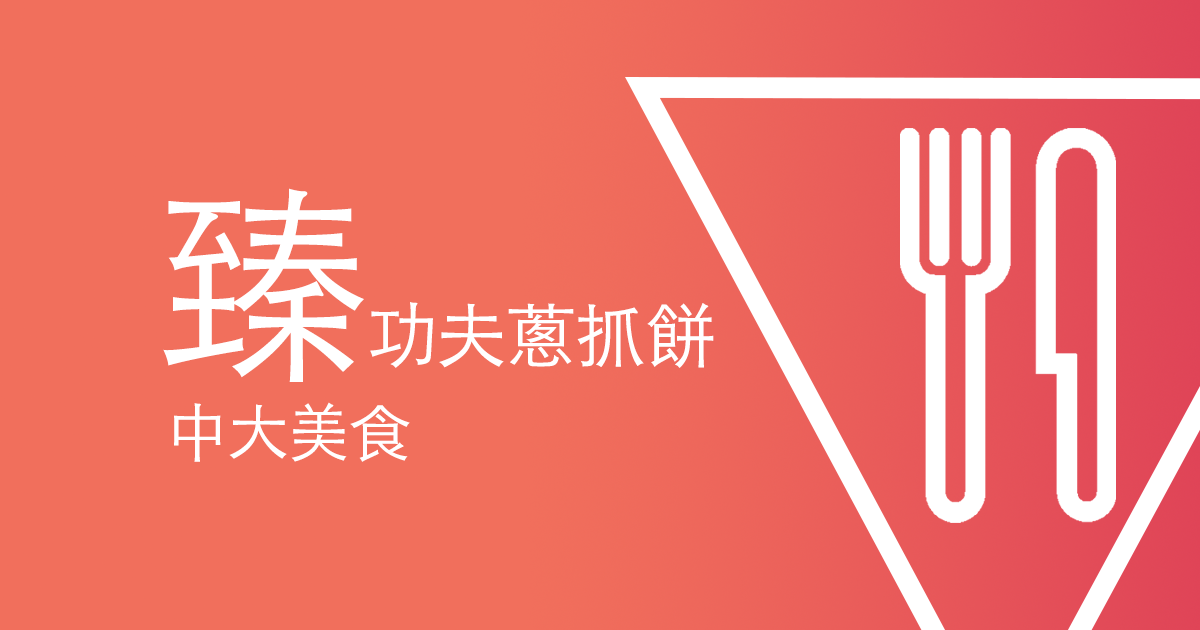
<style>
.page{position:relative;width:1200px;height:630px;background:#f16f5c}
.page>*{position:absolute;margin:0}
.t1{font:71.1px "STHeitiTC-Light";letter-spacing:-0.02em;color:#ffffff}
.t2{font:213.3px "STHeitiTC-Light";letter-spacing:-0.02em;color:#ffffff}
.t3{font:62.2px "STHeitiTC-Light";letter-spacing:-0.02em;color:#ffffff}
</style>
<div class="page">
<p class="t1" style="left:163px;top:188px;width:551px;height:194px"><span class="t2">臻</span>功夫蔥抓餅</p>
<p class="t3" style="left:174px;top:402px;width:236px;height:60px">中大美食</p>
</div>
